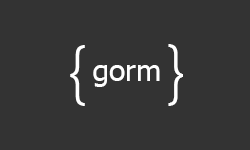
<style>
.page{position:relative;width:250px;height:150px;background:#333333}
.page>*{position:absolute;margin:0}
.t1{font:72px "SegoeUI-Light";color:#ffffff}
.t2{font:30px "Tahoma";color:#ffffff}
</style>
<div class="page">
<p class="t1" style="left:70px;top:44px;width:113px;height:62px">{    }</p>
<p class="t2" style="left:93px;top:65px;width:67px;height:22px">gorm</p>
</div>
